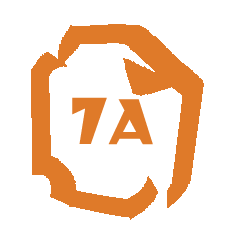
<style>
.page{position:relative;width:225px;height:225px;background:#ffffff}
.page>*{position:absolute;margin:0}
.t1{font:60px "BlitzkriegNF";color:#df7a29}
</style>
<div class="page">
<p class="t1" style="left:72px;top:97px;width:81px;height:48px">7A</p>
</div>
